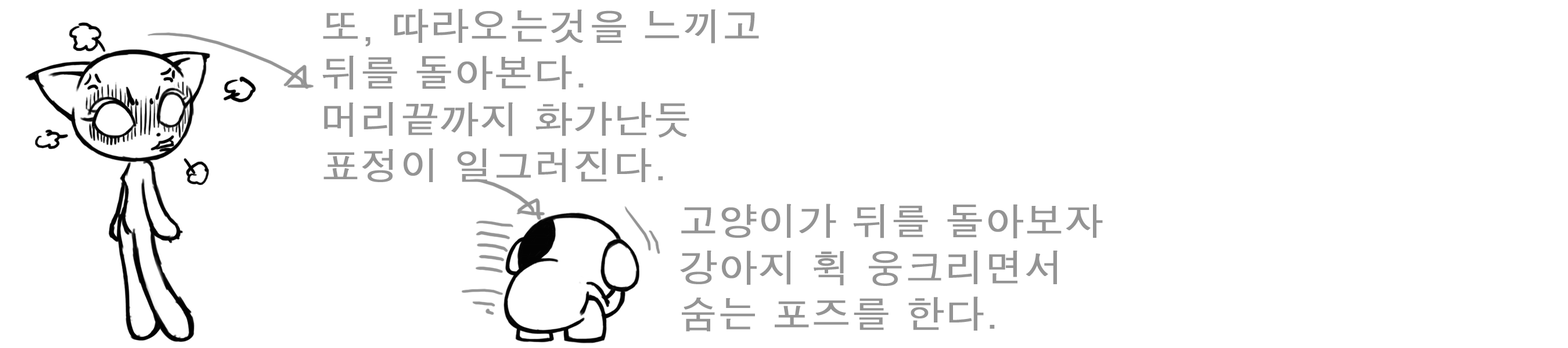
<style>
.page{position:relative;width:1568px;height:348px;background:#ffffff}
.page>*{position:absolute;margin:0}
.t1{font:38.7px "Dotum";color:#949494;font-weight:bold}
</style>
<div class="page">
<p class="t1" style="left:322px;top:9px;width:437px;height:173px">또, 따라오는것을 느끼고<br>뒤를 돌아본다.<br>머리끝까지 화가난듯<br>표정이 일그러진다.</p>
<p class="t1" style="left:680px;top:204px;width:423px;height:128px">고양이가 뒤를 돌아보자<br>강아지 휙 웅크리면서<br>숨는 포즈를 한다.</p>
</div>
